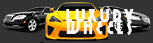
<style>
.page{position:relative;width:153px;height:43px;background:#333333}
.page>*{position:absolute;margin:0}
.t1{font:17px/12px "Chi-TownNF";letter-spacing:0.22em;color:#faf8f8}
</style>
<div class="page">
<p class="t1" style="left:66px;top:9px;width:68px;height:26px;text-align:center">LUXURY<br>WHEELS</p>
</div>
